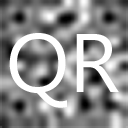
<style>
.page{position:relative;width:128px;height:128px}
.page>*{position:absolute;margin:0}
.t1{font:82.9px "MicrosoftTaiLe";color:#ffffff}
</style>
<div class="page">
<p class="t1" style="left:9px;top:33px;width:110px;height:75px">QR</p>
</div>
